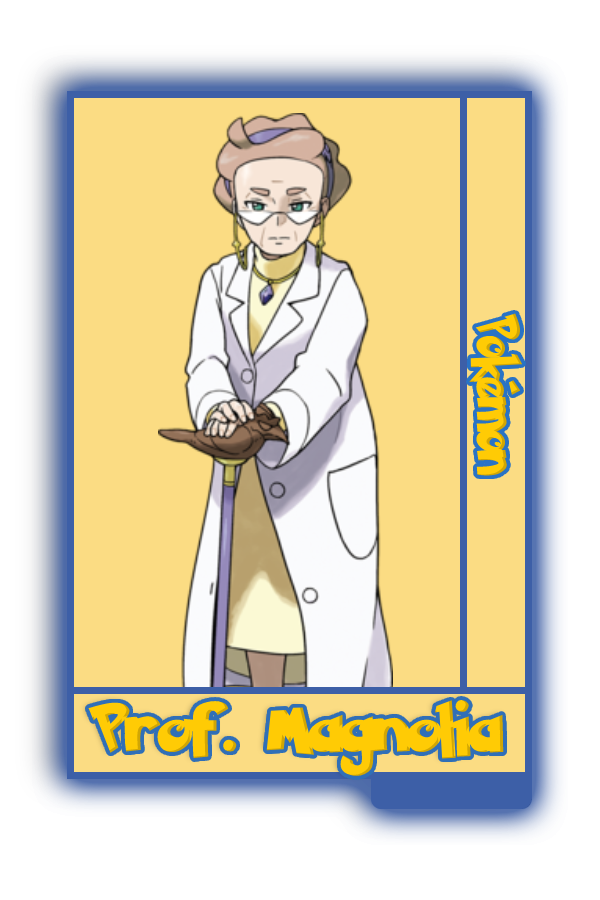
<style>
.page{position:relative;width:600px;height:900px;background:#fbdc83}
.page>*{position:absolute;margin:0}
.t1{font:48.8px "PokemonSolidNormal";color:#ffcb05;scale:0.8 1}
.t2{font:55.2px "PokemonSolidNormal";color:#ffcb05;scale:1.12 1}
</style>
<div class="page">
<p class="t1" style="left:469px;top:313px;width:54px;height:163px;rotate:90deg">Pokémon</p>
<p class="t2" style="left:88px;top:700px;width:416px;height:76px">Prof. Magnolia</p>
</div>
